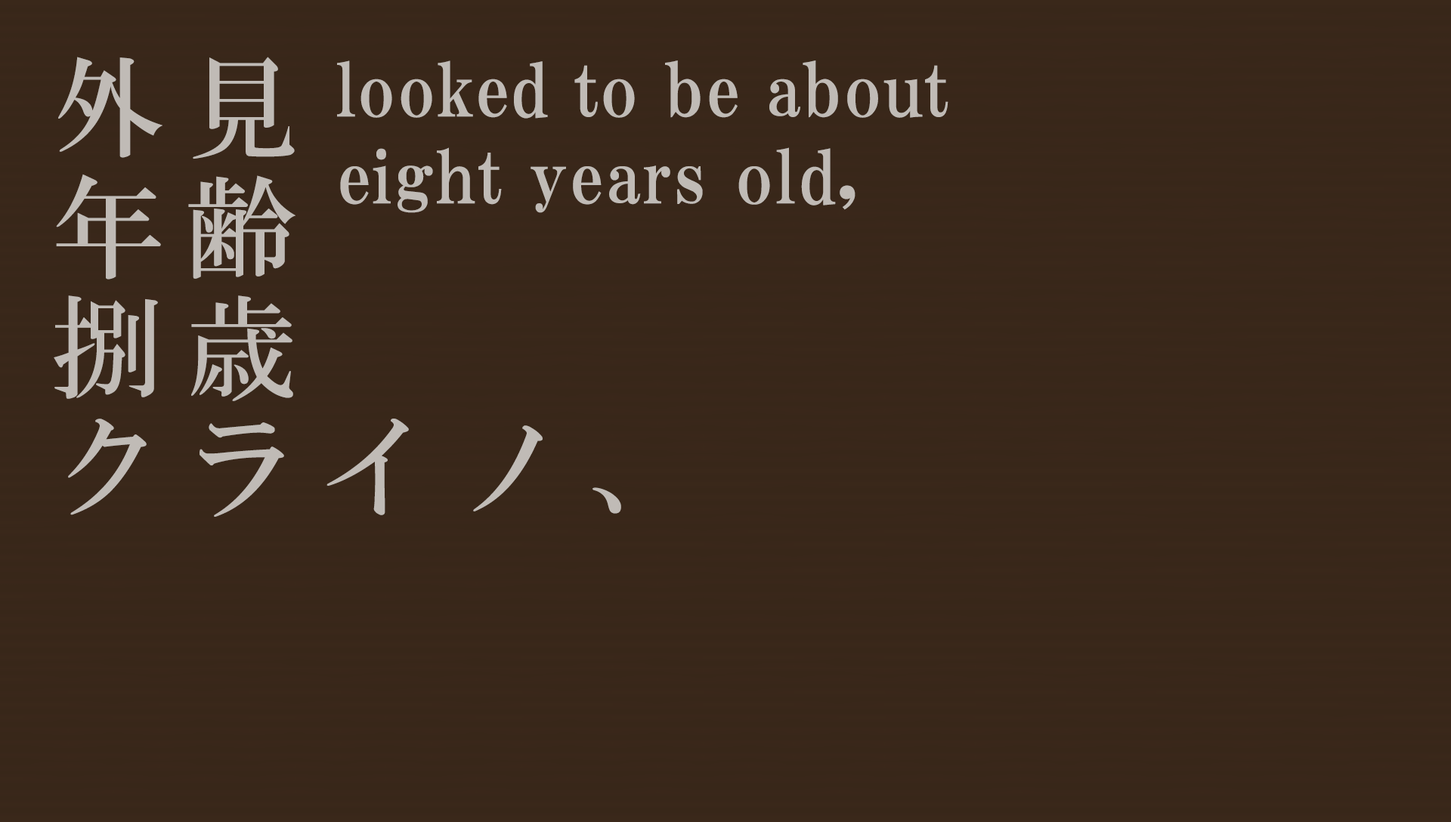
<style>
.page{position:relative;width:1451px;height:822px;background:#382719}
.page>*{position:absolute;margin:0}
.t1{font:110.6px/120.4px "HGMinchoB";letter-spacing:0.21em;color:#c0bbb6}
.t2{font:72.5px "HGPMinchoE";letter-spacing:0.01em;color:#c0bbb6}
.t3{font:72.5px "HGPMinchoE";letter-spacing:0.025em;color:#c0bbb6}
</style>
<div class="page">
<p class="t1" style="left:54px;top:57px;width:567px;height:460px">外見<br>年齢<br>捌歳<br>クライノ、</p>
<p class="t2" style="left:337px;top:60px;width:611px;height:153px">looked to be about<br><span class="t3">eight years old,</span></p>
</div>
